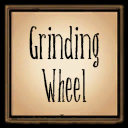
<style>
.page{position:relative;width:128px;height:128px}
.page>*{position:absolute;margin:0}
.t1{font:36px "Belisaplumillamanual";color:#000000}
</style>
<div class="page">
<p class="t1" style="left:29px;top:25px;width:71px;height:78px;text-align:center">Grinding<br>Wheel</p>
</div>
